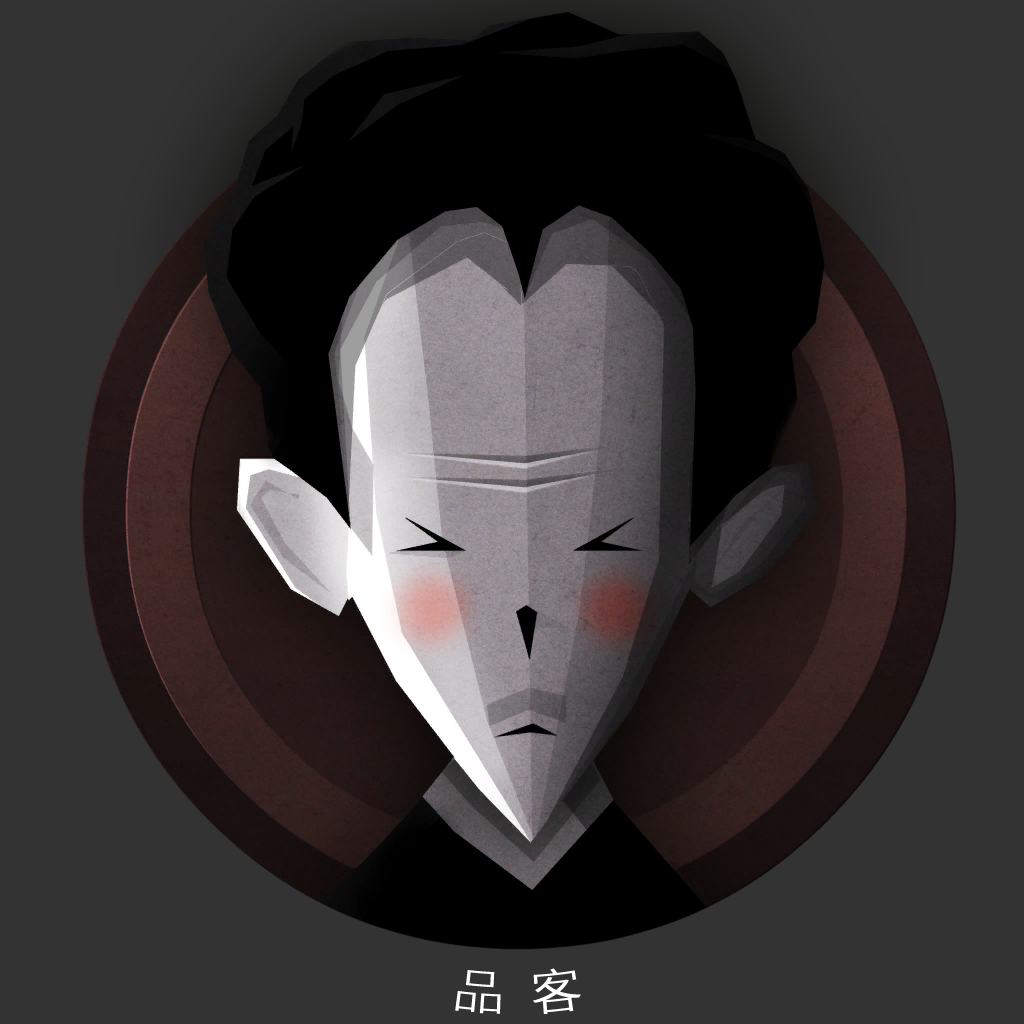
<style>
.page{position:relative;width:1024px;height:1024px;background:#333333}
.page>*{position:absolute;margin:0}
.t1{font:48px "SourceHanSansSC-Normal";letter-spacing:0.5em;color:#ffffff}
</style>
<div class="page">
<p class="t1" style="left:455px;top:968px;width:126px;height:46px">品客</p>
</div>
